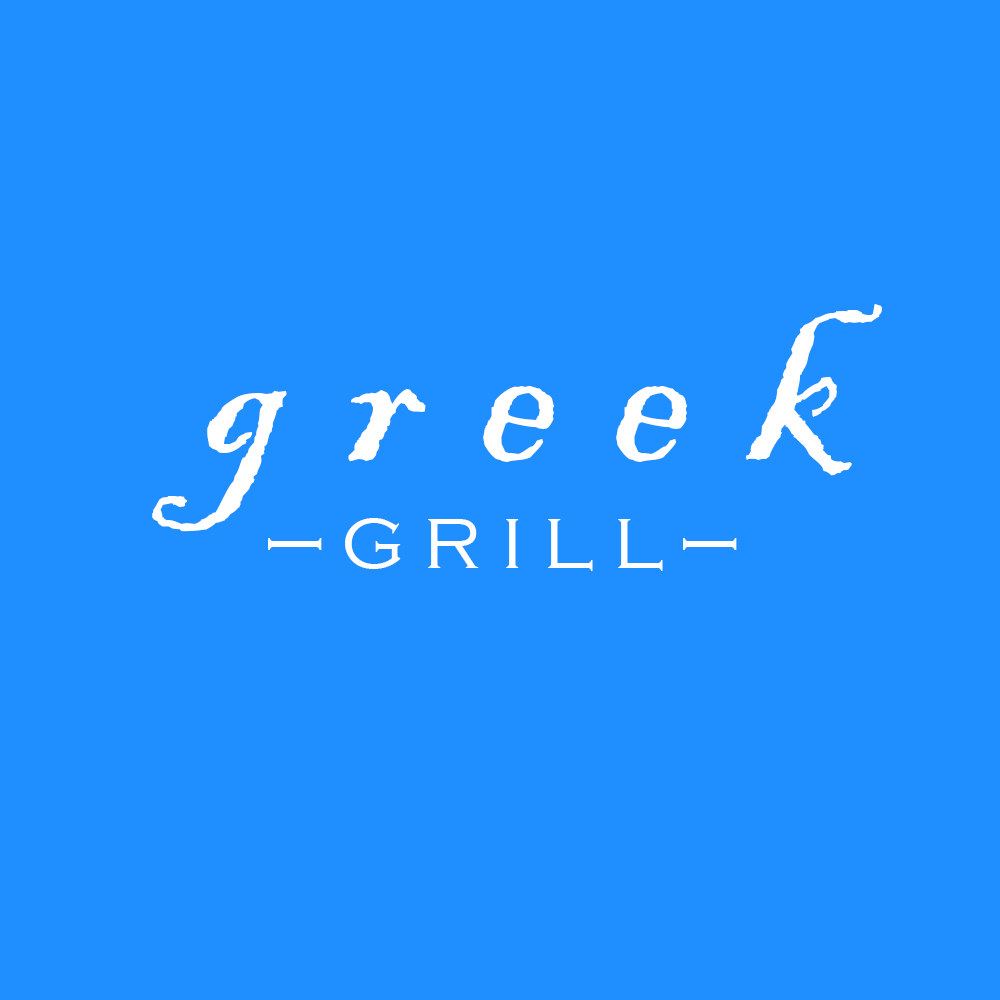
<style>
.page{position:relative;width:1000px;height:1000px;background:#1f8eff}
.page>*{position:absolute;margin:0}
.t1{font:253.8px "BlackadderITC-Regular";letter-spacing:0.221em;color:#ffffff}
.t2{font:89.8px "CopperplateGothic-Light";letter-spacing:0.221em;color:#ffffff}
</style>
<div class="page">
<p class="t1" style="left:152px;top:304px;width:730px;height:228px">greek</p>
<p class="t2" style="left:268px;top:518px;width:469px;height:53px">—grill—</p>
</div>
